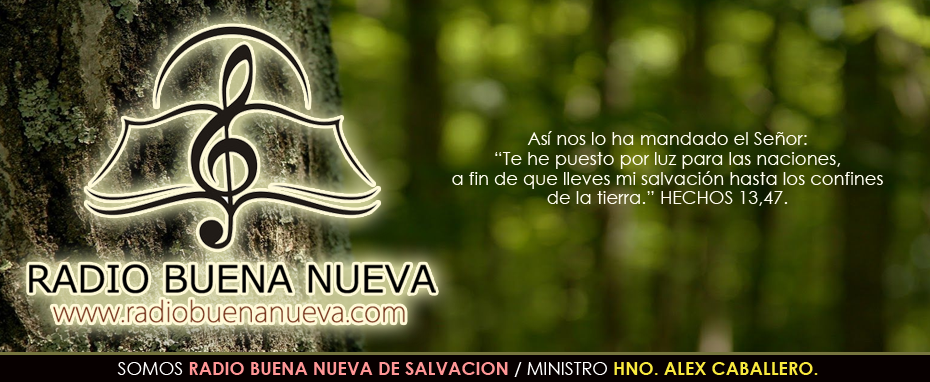
<style>
.page{position:relative;width:930px;height:382px}
.page>*{position:absolute;margin:0}
.t1{font:18px/19.7px "CenturyGothic";color:#fffdf0}
.t2{font:18px "CenturyGothic-Bold";color:#ff9696}
.t3{font:18px "CenturyGothic";color:#ffffff}
.t4{font:18px "CenturyGothic-Bold";color:#f8e93e}
</style>
<div class="page">
<p class="t1" style="left:452px;top:131px;width:431px;height:75px;text-align:center">Así nos lo ha mandado el Señor:<br>“Te he puesto por luz para las naciones,<br>a fin de que lleves mi salvación hasta los confines de la tierra.” HECHOS 13,47.</p>
<p class="t2" style="left:117px;top:362px;width:701px;height:15px"><span class="t3">SOMOS </span>RADIO BUENA NUEVA DE SALVACION <span class="t3">/ MINISTRO </span><span class="t4">HNO. ALEX CABALLERO.</span></p>
</div>
